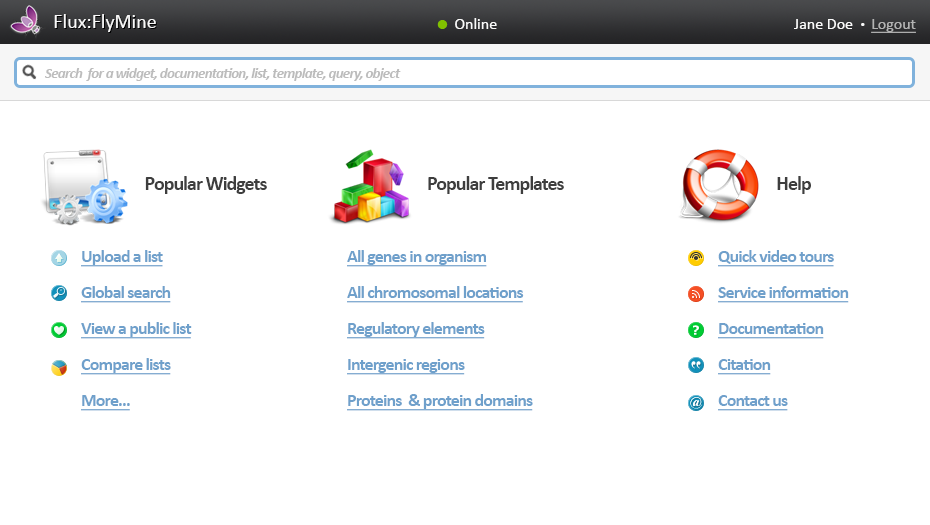
<style>
.page{position:relative;width:930px;height:525px;background:#ffffff}
.page>*{position:absolute;margin:0}
.t1{font:20px "Calibri";color:#f9f9f9}
.t2{font:16px "Calibri";color:#fafafa}
.t3{font:30px "Calibri";color:#81c000}
.t4{font:10px "Calibri";color:#fafafa}
.t5{font:16px "Calibri";color:#b3b3b3;text-decoration:underline}
.t6{font:15px "Calibri-BoldItalic";letter-spacing:-0.05em;color:#bcbcbc}
.t7{font:20px "Calibri-Bold";letter-spacing:-0.05em;color:#3e3e3e}
.t8{font:18px/36px "Calibri-Bold";letter-spacing:-0.05em;color:#6fa0cb;text-decoration:underline}
</style>
<div class="page">
<p class="t1" style="left:54px;top:14px;width:102px;height:18px">Flux:FlyMine</p>
<p class="t2" style="left:437px;top:18px;width:60px;height:11px"><span class="t3">•  </span>Online</p>
<p class="t2" style="left:794px;top:19px;width:122px;height:14px">Jane Doe  <span class="t4">•  </span><span class="t5">Logout</span></p>
<p class="t6" style="left:45px;top:68px;width:356px;height:13px">Search  for a widget, documentation, list, template, query, object</p>
<p class="t7" style="left:145px;top:176px;width:122px;height:18px">Popular Widgets</p>
<p class="t7" style="left:428px;top:176px;width:136px;height:18px">Popular Templates</p>
<p class="t7" style="left:777px;top:176px;width:34px;height:18px">Help</p>
<p class="t8" style="left:81px;top:250px;width:111px;height:161px">Upload a list<br>Global search<br>View a public list<br>Compare lists<br>More...</p>
<p class="t8" style="left:347px;top:250px;width:186px;height:161px">All genes in organism<br>All chromosomal locations<br>Regulatory elements<br>Intergenic regions<br>Proteins  &amp; protein domains</p>
<p class="t8" style="left:718px;top:250px;width:131px;height:161px">Quick video tours<br>Service information<br>Documentation<br>Citation<br>Contact us</p>
</div>
